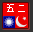
<style>
.page{position:relative;width:33px;height:32px;background:#f20000}
.page>*{position:absolute;margin:0}
.t1{font:10.4px "SimSun";color:#ffffff}
</style>
<div class="page">
<p class="t1" style="left:7px;top:4px;width:18px;height:8px">五二</p>
</div>
